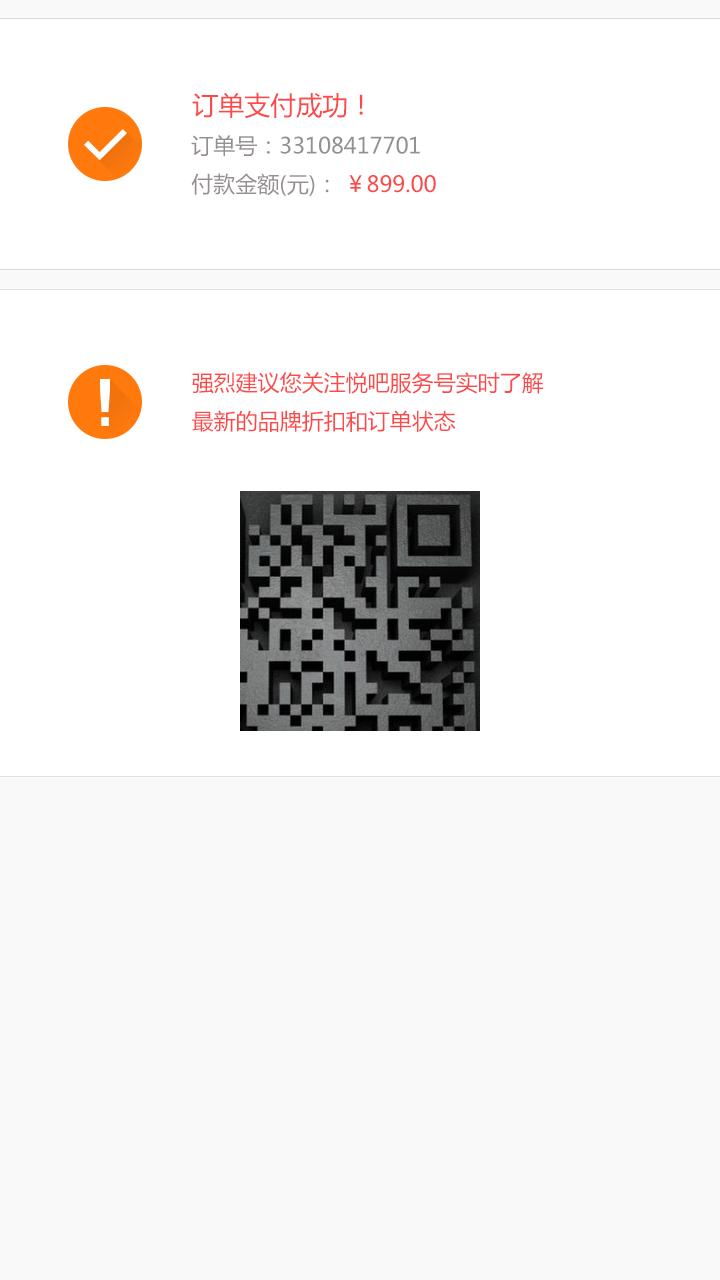
<style>
.page{position:relative;width:720px;height:1280px;background:#ffffff}
.page>*{position:absolute;margin:0}
.t1{font:26px "MicrosoftYaHei";color:#fc4a4a}
.t2{font:22px "MicrosoftYaHei";color:#958f93}
.t3{font:22px "MicrosoftYaHei";color:#fc4a4a}
</style>
<div class="page">
<p class="t1" style="left:192px;top:92px;width:171px;height:27px">订单支付成功！</p>
<p class="t2" style="left:191px;top:135px;width:245px;height:61px">订单号：33108417701<br>付款金额(元)： <span class="t3">￥899.00</span></p>
<p class="t3" style="left:192px;top:372px;width:352px;height:60px">强烈建议您关注悦吧服务号实时了解<br>最新的品牌折扣和订单状态</p>
</div>
